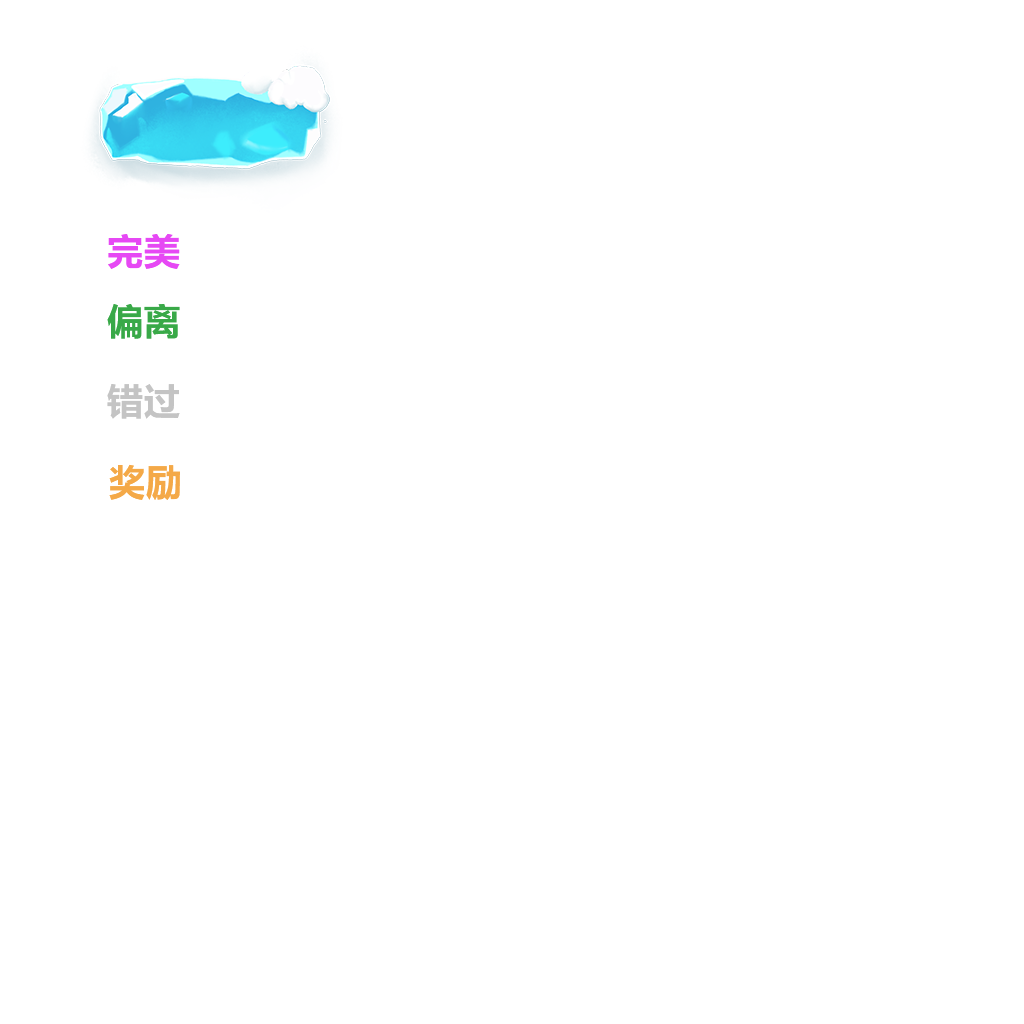
<style>
.page{position:relative;width:1024px;height:1024px;background:#ffffff}
.page>*{position:absolute;margin:0}
.t1{font:36px "MicrosoftYaHei-Bold";letter-spacing:0.04em;color:#e648f4}
.t2{font:36px "MicrosoftYaHei-Bold";letter-spacing:0.04em;color:#39a948}
.t3{font:36px "MicrosoftYaHei-Bold";letter-spacing:0.04em;color:#c4c4c4}
.t4{font:36px "MicrosoftYaHei-Bold";letter-spacing:0.04em;color:#f4a948}
</style>
<div class="page">
<p class="t1" style="left:108px;top:234px;width:72px;height:35px">完美</p>
<p class="t2" style="left:107px;top:304px;width:73px;height:35px">偏离</p>
<p class="t3" style="left:107px;top:384px;width:73px;height:35px">错过</p>
<p class="t4" style="left:109px;top:464px;width:71px;height:36px">奖励</p>
</div>
